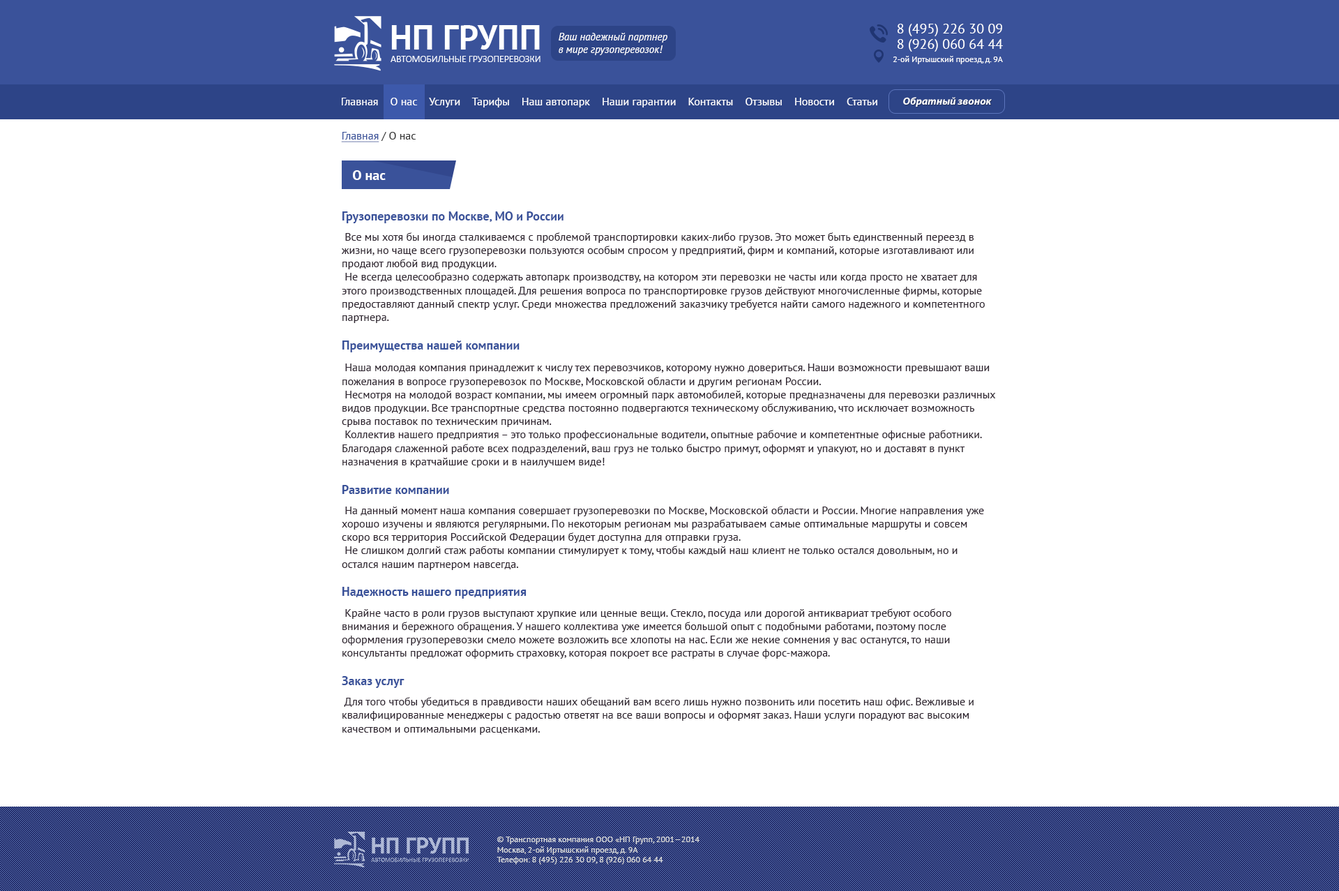
<style>
.page{position:relative;width:1339px;height:891px;background:#ffffff}
.page>*{position:absolute;margin:0}
.t1{font:13.9px "PTSans-Regular";color:#ffffff}
.t2{font:10.5px "PTSans-Italic";color:#ffffff}
.t3{font:8.4px "PTSans-Regular";color:#ffffff}
.t4{font:11.2px "PTSans-Regular";color:#ffffff}
.t5{font:10.5px "MyriadPro-BoldIt";color:#ffffff}
.t6{font:11.2px "PTSans-Regular";color:#3a529a;text-decoration:underline}
.t7{font:11.2px "PTSans-Regular";color:#353535}
.t8{font:13.9px "PTSans-Bold";color:#ffffff}
.t9{font:11.2px "PTSans-Regular";color:#2e242f}
.t10{font:12.6px "PTSans-Bold";color:#3a529a}
.t11{font:11.2px/7px "PTSans-Regular";color:#2e242f}
.t12{font:8.4px "PTSans-Regular";color:#dbdbdb}
</style>
<div class="page">
<p class="t1" style="left:898px;top:24px;width:104px;height:12px">8 (495) 226 30 09</p>
<p class="t2" style="left:559px;top:33px;width:108px;height:22px">Ваш надежный партнер <br>в мире грузоперевозок!</p>
<p class="t1" style="left:898px;top:39px;width:105px;height:13px">8 (926) 060 64 44</p>
<p class="t3" style="left:893px;top:56px;width:110px;height:8px">2-ой Иртышский проезд, д. 9А</p>
<p class="t4" style="left:342px;top:98px;width:535px;height:9px">Главная    О нас    Услуги    Тарифы    Наш автопарк    Наши гарантии    Контакты    Отзывы    Новости    Статьи</p>
<p class="t5" style="left:903px;top:97px;width:89px;height:10px">Обратный звонок</p>
<p class="t6" style="left:341px;top:132px;width:75px;height:10px">Главная <span class="t7">/ О нас</span></p>
<p class="t8" style="left:353px;top:170px;width:33px;height:10px">О нас</p>
<p class="t9" style="left:341px;top:211px;width:655px;height:523px"><span class="t10">Грузоперевозки по Москве, МО и России<br>  <br></span><span class="t11"> Все мы хотя бы иногда сталкиваемся с проблемой транспортировки каких-либо грузов. Это может быть единственный переезд в </span>жизни, но чаще всего грузоперевозки пользуются особым спросом у предприятий, фирм и компаний, которые изготавливают или продают любой вид продукции. <br> Не всегда целесообразно содержать автопарк производству, на котором эти перевозки не часты или когда просто не хватает для этого производственных площадей. Для решения вопроса по транспортировке грузов действуют многочисленные фирмы, которые предоставляют данный спектр услуг. Среди множества предложений заказчику требуется найти самого надежного и компетентного партнера. <br> <br><span class="t10">Преимущества нашей компании<br><br></span><span class="t11"> Наша молодая компания принадлежит к числу тех перевозчиков, которому нужно довериться. Наши возможности превышают ваши </span>пожелания в вопросе грузоперевозок по Москве, Московской области и другим регионам России.<br> Несмотря на молодой возраст компании, мы имеем огромный парк автомобилей, которые предназначены для перевозки различных видов продукции. Все транспортные средства постоянно подвергаются техническому обслуживанию, что исключает возможность срыва поставок по техническим причинам. <br> Коллектив нашего предприятия – это только профессиональные водители, опытные рабочие и компетентные офисные работники. Благодаря слаженной работе всех подразделений, ваш груз не только быстро примут, оформят и упакуют, но и доставят в пункт назначения в кратчайшие сроки и в наилучшем виде!<br> <br><span class="t10">Развитие компании<br><br></span><span class="t11"> На данный момент наша компания совершает грузоперевозки по Москве, Московской области и России. Многие направления уже </span>хорошо изучены и являются регулярными. По некоторым регионам мы разрабатываем самые оптимальные маршруты и совсем скоро вся территория Российской Федерации будет доступна для отправки груза. <br> Не слишком долгий стаж работы компании стимулирует к тому, чтобы каждый наш клиент не только остался довольным, но и остался нашим партнером навсегда.<br> <br><span class="t10">Надежность нашего предприятия<br><br></span><span class="t11"> Крайне часто в роли грузов выступают хрупкие или ценные вещи. Стекло, посуда или дорогой антиквариат требуют особого </span>внимания и бережного обращения. У нашего коллектива уже имеется большой опыт с подобными работами, поэтому после оформления грузоперевозки смело можете возложить все хлопоты на нас. Если же некие сомнения у вас останутся, то наши консультанты предложат оформить страховку, которая покроет все растраты в случае форс-мажора.<br> <br><span class="t10">Заказ услуг<br><br></span><span class="t11"> Для того чтобы убедиться в правдивости наших обещаний вам всего лишь нужно позвонить или посетить наш офис. Вежливые и </span>квалифицированные менеджеры с радостью ответят на все ваши вопросы и оформят заказ. Наши услуги порадуют вас высоким качеством и оптимальными расценками.</p>
<p class="t12" style="left:497px;top:836px;width:202px;height:28px">© Транспортная компания ООО «НП Групп, 2001—2014 <br>Москва, 2-ой Иртышский проезд, д. 9А<br>Телефон: 8 (495) 226 30 09, 8 (926) 060 64 44</p>
</div>
